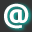
<style>
.page{position:relative;width:32px;height:32px;background:#333333}
.page>*{position:absolute;margin:0}
.t1{font:28px "Ubuntu-Bold";color:#ffffff}
</style>
<div class="page">
<p class="t1" style="left:4px;top:3px;width:25px;height:26px">@</p>
</div>
